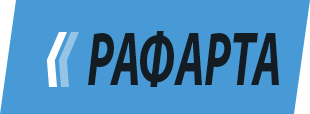
<style>
.page{position:relative;width:310px;height:114px;background:#489ad6}
.page>*{position:absolute;margin:0}
.t1{font:76.8px "MyriadPro-BoldIt";color:#141c23;text-transform:uppercase;scale:0.61 1}
</style>
<div class="page">
<p class="t1" style="left:88px;top:31px;width:191px;height:56px">Рафарта</p>
</div>
